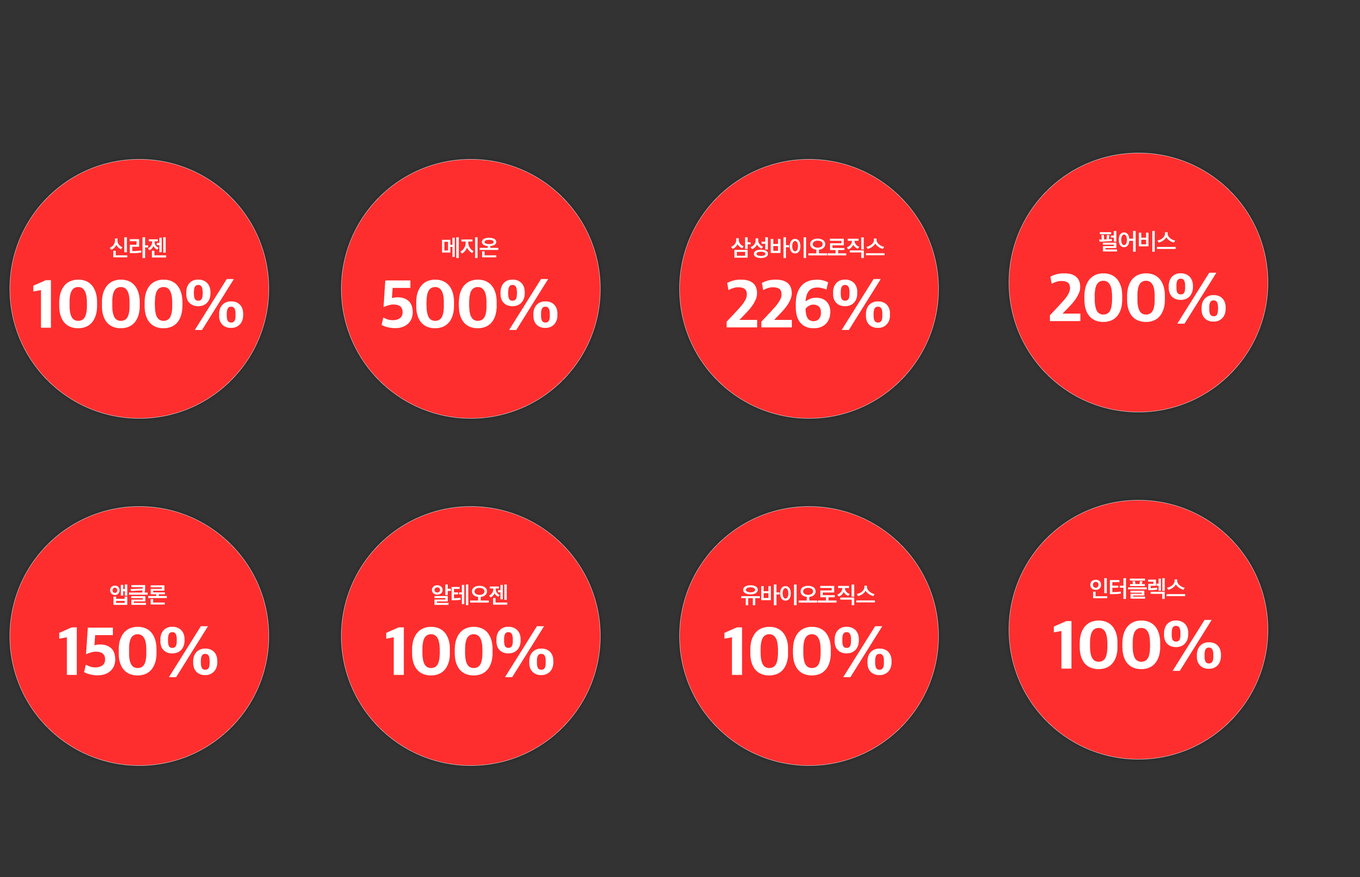
<style>
.page{position:relative;width:1360px;height:877px;background:#333333}
.page>*{position:absolute;margin:0}
.t1{font:21.6px "SDGothicNeoaTTF-fSm";letter-spacing:-0.03em;color:#ffffff}
.t2{font:64.2px "SDGothicNeoaTTF-hExBd";letter-spacing:-0.03em;color:#ffffff}
</style>
<div class="page">
<p class="t1" style="left:1099px;top:231px;width:77px;height:21px">펄어비스</p>
<p class="t1" style="left:110px;top:237px;width:56px;height:21px">신라젠</p>
<p class="t1" style="left:442px;top:237px;width:57px;height:21px">메지온</p>
<p class="t1" style="left:731px;top:237px;width:154px;height:21px">삼성바이오로직스</p>
<p class="t2" style="left:33px;top:279px;width:210px;height:51px">1000%</p>
<p class="t2" style="left:381px;top:279px;width:177px;height:51px">500%</p>
<p class="t2" style="left:726px;top:279px;width:164px;height:51px">226%</p>
<p class="t2" style="left:1050px;top:272px;width:176px;height:52px">200%</p>
<p class="t1" style="left:1090px;top:578px;width:96px;height:21px">인터플렉스</p>
<p class="t1" style="left:110px;top:584px;width:57px;height:21px">앱클론</p>
<p class="t1" style="left:432px;top:584px;width:75px;height:21px">알테오젠</p>
<p class="t1" style="left:741px;top:584px;width:134px;height:21px">유바이오로직스</p>
<p class="t2" style="left:59px;top:626px;width:158px;height:51px">150%</p>
<p class="t2" style="left:386px;top:626px;width:168px;height:51px">100%</p>
<p class="t2" style="left:724px;top:626px;width:168px;height:51px">100%</p>
<p class="t2" style="left:1054px;top:619px;width:167px;height:52px">100%</p>
</div>
